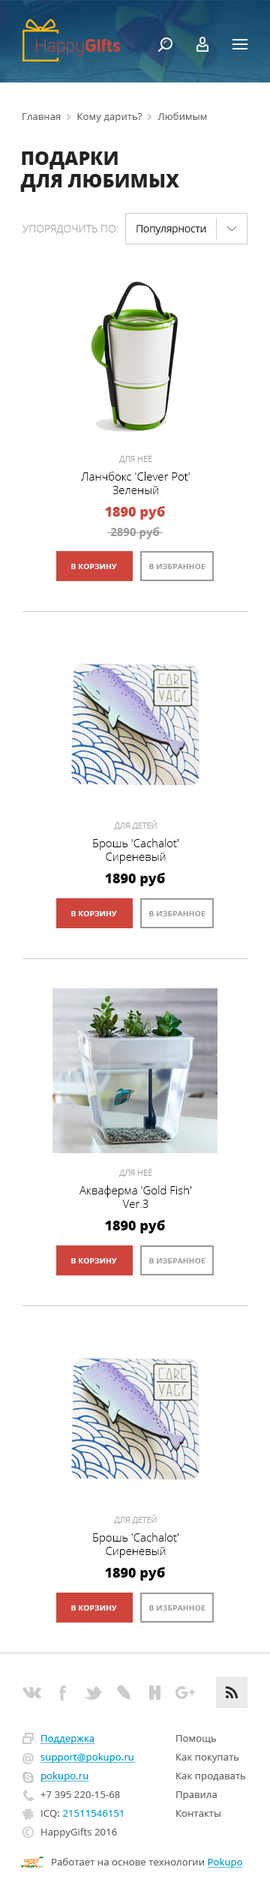
<style>
.page{position:relative;width:270px;height:1888px;background:#ffffff}
.page>*{position:absolute;margin:0}
.t1{font:9.8px "OpenSans";letter-spacing:0.01em;color:#666666}
.t2{font:18.7px "OpenSans-Extrabold";color:#232323;text-transform:uppercase}
.t3{font:10.5px "OpenSans-Light";color:#a3a3a3;text-transform:uppercase}
.t4{font:10.5px "OpenSans";letter-spacing:-0.025em;color:#28282c}
.t5{font:8.2px "OpenSans-Light";color:#a3a3a3;text-transform:uppercase}
.t6{font:11.2px/13.5px "OpenSans-Light";color:#000000}
.t7{font:13.5px/19.5px "OpenSans-Extrabold";color:#cf453c}
.t8{font:11.2px/19.5px "OpenSans-Bold";color:#999999}
.t9{font:7.5px "OpenSans-Bold";letter-spacing:0.025em;color:#ffffff;text-transform:uppercase}
.t10{font:7.5px "OpenSans-Bold";letter-spacing:0.025em;color:#999999;text-transform:uppercase}
.t11{font:13.5px "OpenSans-Extrabold";color:#000000}
</style>
<div class="page">
<p class="t1" style="left:22px;top:112px;width:185px;height:10px">Главная      Кому дарить?      Любимым</p>
<p class="t2" style="left:20px;top:152px;width:159px;height:40px">ПОДАРКИ <br>ДЛЯ ЛЮБИМЫХ</p>
<p class="t3" style="left:22px;top:225px;width:96px;height:10px">упорядочить по:</p>
<p class="t4" style="left:136px;top:225px;width:70px;height:10px">Популярности</p>
<p class="t5" style="left:119px;top:454px;width:33px;height:10px">для неё</p>
<p class="t6" style="left:81px;top:472px;width:109px;height:22px;text-align:center">Ланчбокс 'Clever Pot'<br>Зеленый</p>
<p class="t7" style="left:105px;top:506px;width:60px;height:33px;text-align:center">1890 руб<br><span class="t8">2890 руб</span></p>
<p class="t9" style="left:71px;top:564px;width:46px;height:5px">в корзину</p>
<p class="t10" style="left:149px;top:564px;width:57px;height:5px">в избранное</p>
<p class="t5" style="left:114px;top:820px;width:43px;height:10px">для детей</p>
<p class="t6" style="left:93px;top:838px;width:85px;height:26px;text-align:center">Брошь 'Cachalot'<br>Сиреневый</p>
<p class="t11" style="left:105px;top:873px;width:60px;height:13px">1890 руб</p>
<p class="t9" style="left:71px;top:911px;width:46px;height:5px">в корзину</p>
<p class="t10" style="left:149px;top:911px;width:57px;height:5px">в избранное</p>
<p class="t5" style="left:119px;top:1168px;width:33px;height:10px">для неё</p>
<p class="t6" style="left:80px;top:1186px;width:111px;height:22px;text-align:center">Акваферма 'Gold Fish'<br>Ver.3</p>
<p class="t11" style="left:105px;top:1220px;width:60px;height:14px">1890 руб</p>
<p class="t9" style="left:71px;top:1258px;width:46px;height:6px">в корзину</p>
<p class="t10" style="left:149px;top:1258px;width:57px;height:6px">в избранное</p>
<p class="t5" style="left:114px;top:1515px;width:43px;height:10px">для детей</p>
<p class="t6" style="left:93px;top:1533px;width:85px;height:25px;text-align:center">Брошь 'Cachalot'<br>Сиреневый</p>
<p class="t11" style="left:105px;top:1568px;width:60px;height:13px">1890 руб</p>
<p class="t9" style="left:71px;top:1606px;width:46px;height:5px">в корзину</p>
<p class="t10" style="left:149px;top:1606px;width:57px;height:5px">в избранное</p>
</div>
